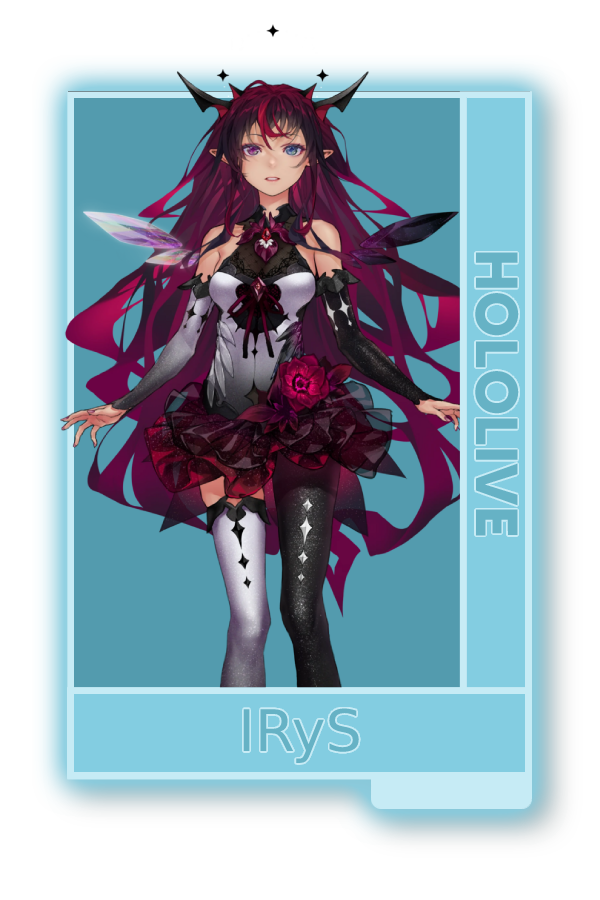
<style>
.page{position:relative;width:600px;height:900px}
.page>*{position:absolute;margin:0}
.t1{font:59.2px "MADETOMMY-Bold";color:#66b2c5}
.t2{font:57.3px "CoolveticaRg-Regular";color:#66b2c5}
</style>
<div class="page">
<p class="t1" style="left:475px;top:252px;width:44px;height:284px;rotate:90deg">HOLOLIVE</p>
<p class="t2" style="left:243px;top:708px;width:116px;height:55px">IRyS</p>
</div>
